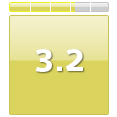
<style>
.page{position:relative;width:117px;height:117px;background:#dad35d}
.page>*{position:absolute;margin:0}
.t1{font:36px "Colaborate-Bold";color:#ffffff;text-transform:uppercase}
</style>
<div class="page">
<p class="t1" style="left:35px;top:49px;width:48px;height:23px">3.2</p>
</div>
